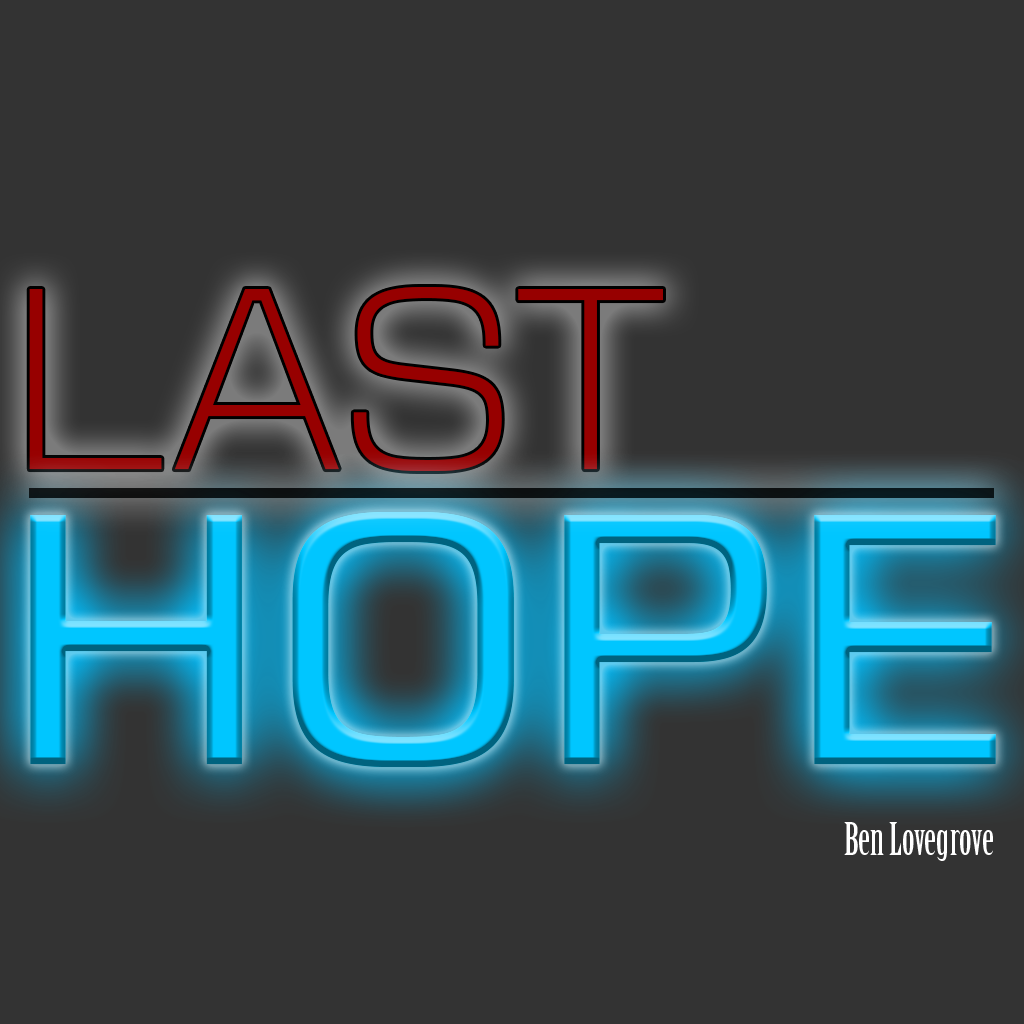
<style>
.page{position:relative;width:1024px;height:1024px;background:#333333}
.page>*{position:absolute;margin:0}
.t1{font:248px "Moire-Light";color:#970000}
.t2{font:342.5px "Moire";color:#00c6ff}
.t3{font:44.3px "BirchStd";color:#ffffff}
</style>
<div class="page">
<p class="t1" style="left:29px;top:287px;width:634px;height:184px">LAST</p>
<p class="t2" style="left:30px;top:512px;width:966px;height:255px">HOPE</p>
<p class="t2" style="left:30px;top:512px;width:966px;height:255px">HOPE</p>
<p class="t3" style="left:844px;top:822px;width:149px;height:39px">Ben Lovegrove</p>
</div>
